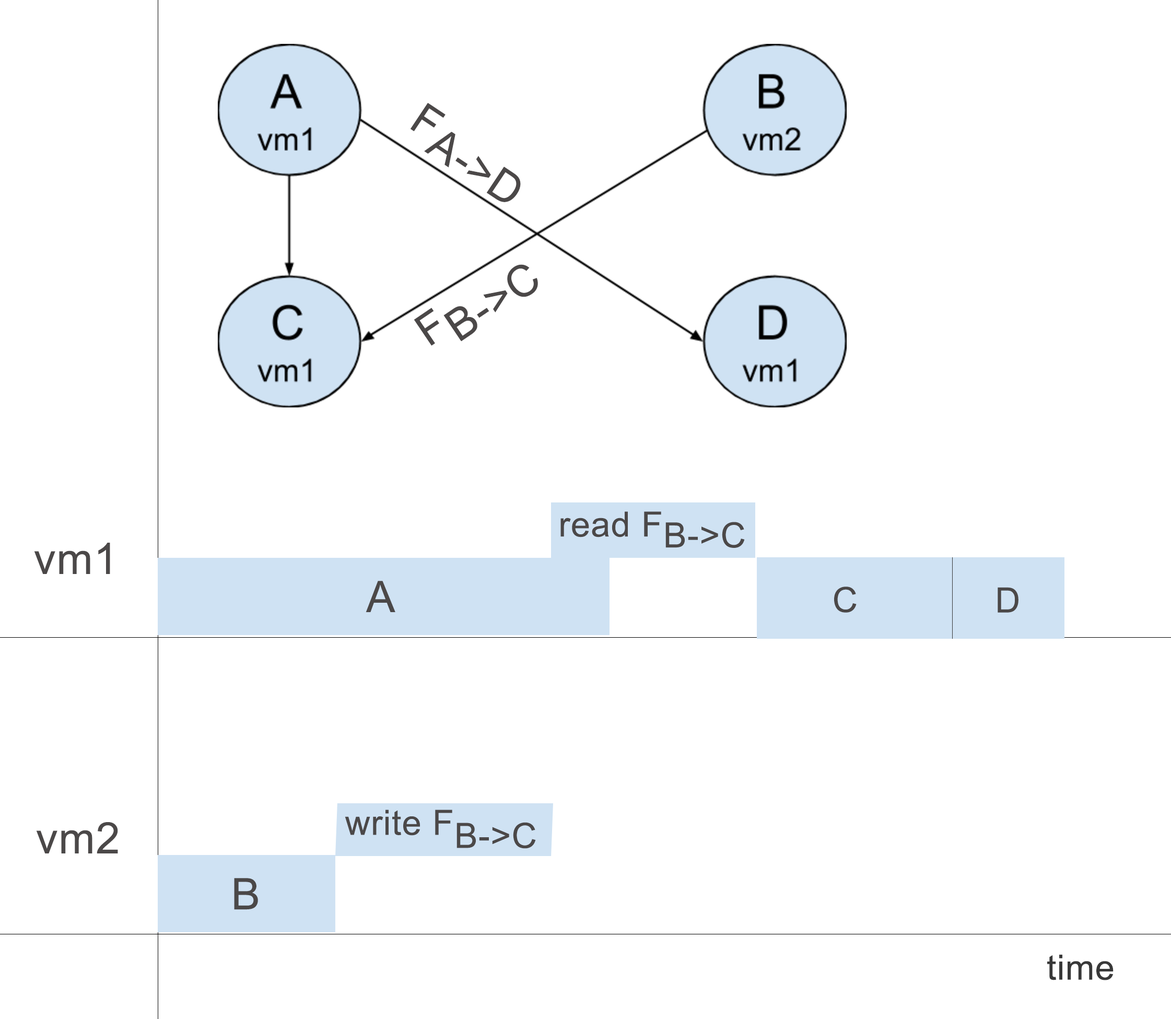
<style>
.page{position:relative;width:1171px;height:1019px;background:#ffffff}
.page>*{position:absolute;margin:0}
.t1{font:43.5px "ArialMT";letter-spacing:0.02em;color:#4b4848}
.t2{font:34.8px "ArialMT";letter-spacing:0.02em;color:#4b4848}
.t3{font:34.8px "ArialMT";letter-spacing:0.02em;color:#383838}
</style>
<div class="page">
<p class="t1" style="left:410px;top:103px;width:111px;height:99px;rotate:34deg">FA-&gt;D</p>
<p class="t1" style="left:414px;top:264px;width:124px;height:82px;rotate:-34deg">FB-&gt;C</p>
<p class="t2" style="left:560px;top:511px;width:185px;height:37px">read FB-&gt;C</p>
<p class="t1" style="left:34px;top:542px;width:76px;height:32px">vm1</p>
<p class="t1" style="left:365px;top:581px;width:30px;height:31px">A</p>
<p class="t2" style="left:834px;top:586px;width:22px;height:26px">C</p>
<p class="t2" style="left:997px;top:587px;width:21px;height:25px">D</p>
<p class="t2" style="left:345px;top:809px;width:191px;height:39px">write FB-&gt;C</p>
<p class="t1" style="left:36px;top:822px;width:82px;height:31px">vm2</p>
<p class="t1" style="left:234px;top:878px;width:24px;height:32px">B</p>
<p class="t3" style="left:1047px;top:954px;width:66px;height:26px">time</p>
</div>
